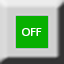
<style>
.page{position:relative;width:64px;height:64px;background:#08b000}
.page>*{position:absolute;margin:0}
.t1{font:12px "MyriadPro-Regular";color:#ffffff}
</style>
<div class="page">
<p class="t1" style="left:22px;top:28px;width:20px;height:8px">OFF</p>
</div>
